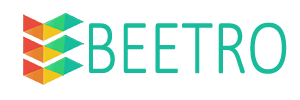
<style>
.page{position:relative;width:300px;height:100px;background:#ffffff}
.page>*{position:absolute;margin:0}
.t1{font:78.4px "Calibri-Light";color:#18bc9c;scale:0.83 1}
</style>
<div class="page">
<p class="t1" style="left:89px;top:22px;width:198px;height:52px">BEETRO</p>
</div>
